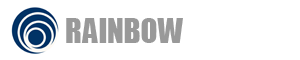
<style>
.page{position:relative;width:300px;height:60px;background:#ffffff}
.page>*{position:absolute;margin:0}
.t1{font:31px "Impact";color:#999999}
</style>
<div class="page">
<p class="t1" style="left:66px;top:18px;width:117px;height:25px">RAINBOW</p>
</div>
